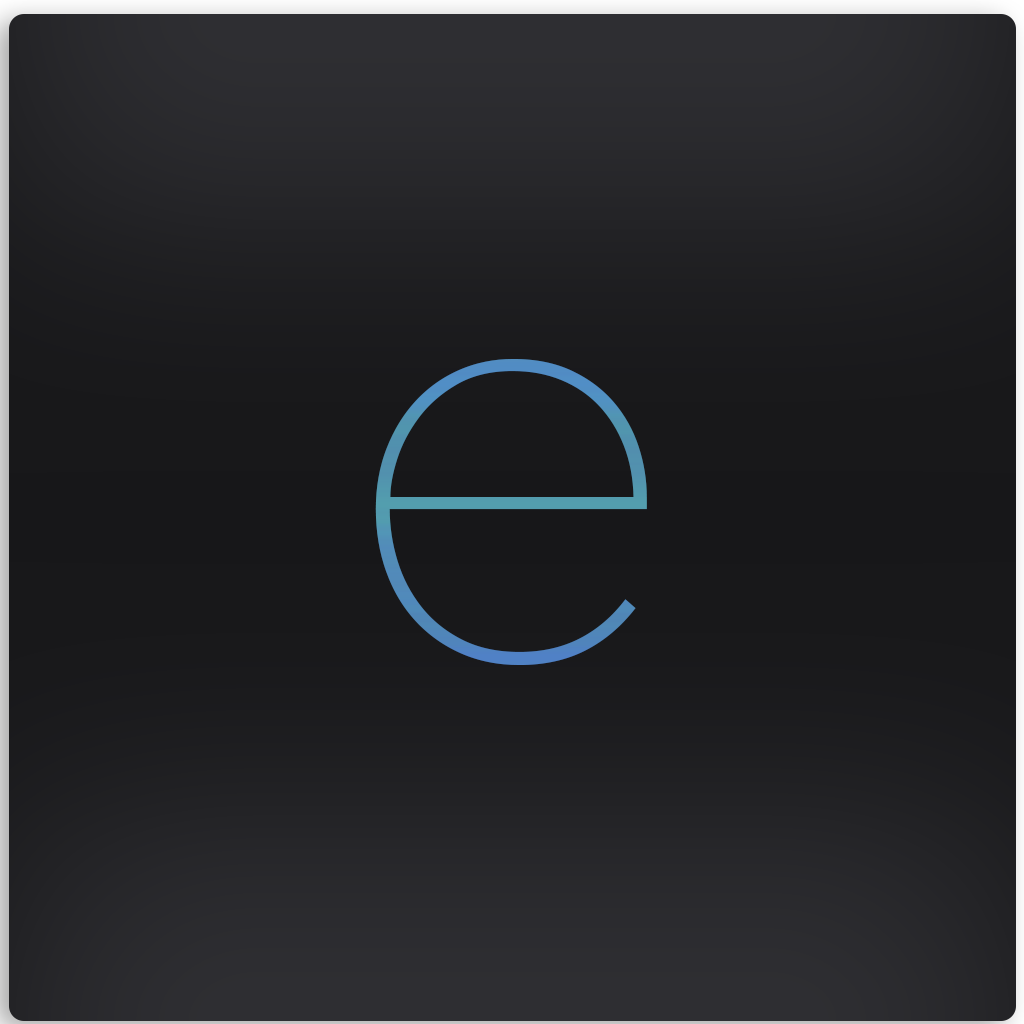
<style>
.page{position:relative;width:1024px;height:1024px}
.page>*{position:absolute;margin:0}
.t1{font:626.8px "AvenirNext-UltraLight";color:#5190b7}
</style>
<div class="page">
<p class="t1" style="left:375px;top:359px;width:272px;height:306px">e</p>
</div>
